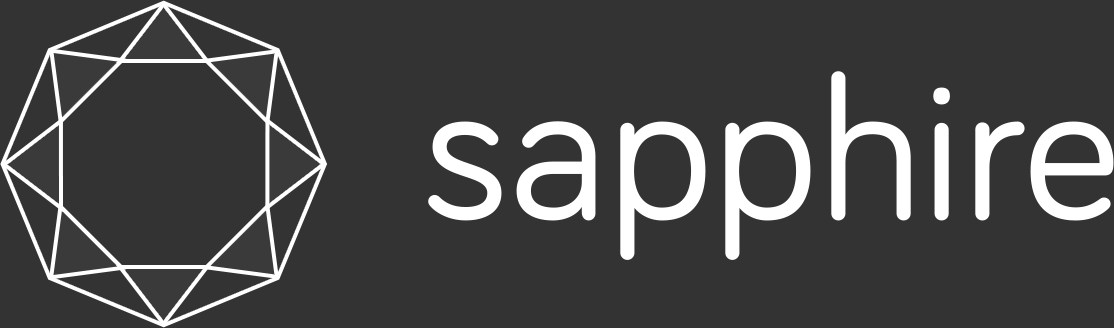
<style>
.page{position:relative;width:1114px;height:328px;background:#333333}
.page>*{position:absolute;margin:0}
.t1{font:205.8px "Bariol-Regular";letter-spacing:-0.025em;color:#ffffff;font-weight:bold}
</style>
<div class="page">
<p class="t1" style="left:428px;top:71px;width:686px;height:189px">sapphire</p>
</div>
